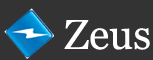
<style>
.page{position:relative;width:153px;height:60px;background:#333333}
.page>*{position:absolute;margin:0}
.t1{font:41.7px "Vani";color:#ffffff}
</style>
<div class="page">
<p class="t1" style="left:64px;top:20px;width:86px;height:30px">Zeus</p>
</div>
